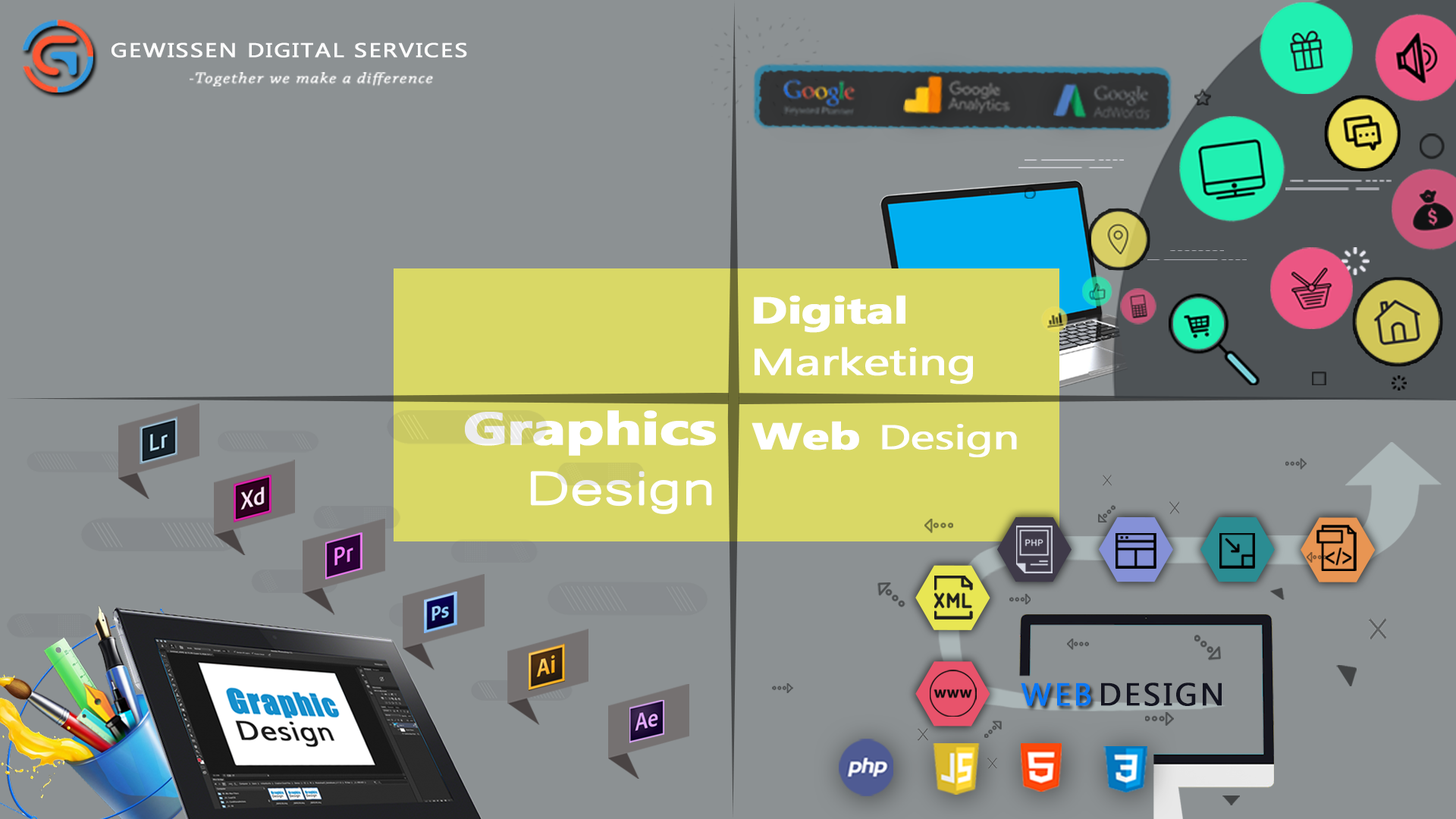
<style>
.page{position:relative;width:1456px;height:819px;background:#8c9193}
.page>*{position:absolute;margin:0}
.t1{font:19.8px "MicrosoftPhagsPa";letter-spacing:0.05em;color:#fcfcfc;font-weight:bold;scale:1.22 1}
.t2{font:15.1px "ChaparralPro-LightIt";letter-spacing:0.05em;color:#ffffff;font-weight:bold;scale:1.2 1}
.t3{font:37.1px/51.1px "MicrosoftPhagsPa";letter-spacing:-0.02em;color:#ffffff;font-weight:bold;scale:1.33 1}
.t4{font:37.1px/51.1px "MicrosoftPhagsPa-Bold";letter-spacing:-0.02em;color:#ffffff;font-weight:bold;scale:1.33 1}
.t5{font:45.9px/60.1px "MicrosoftPhagsPa-Bold";letter-spacing:-0.02em;color:#ffffff;font-weight:bold;scale:1.34 1}
.t6{font:59.7px/60.1px "Microsoft-Yi-Baiti";letter-spacing:-0.02em;color:#ffffff;font-weight:bold;scale:1.34 1}
.t7{font:34.2px "MicrosoftPhagsPa";letter-spacing:-0.02em;color:#ffffff;font-weight:bold;scale:1.33 1}
.t8{font:37.1px "MicrosoftPhagsPa-Bold";letter-spacing:-0.02em;color:#ffffff;font-weight:bold;scale:1.33 1}
.t9{font:31.7px "MicrosoftTaiLe";letter-spacing:0.07em;color:#0b78f4;font-weight:bold}
.t10{font:31.7px "MicrosoftTaiLe";letter-spacing:0.07em;color:#131420;font-weight:bold}
</style>
<div class="page">
<p class="t1" style="left:111px;top:42px;width:356px;height:16px">GEWISSEN DIGITAL SERVICES</p>
<p class="t2" style="left:190px;top:72px;width:243px;height:14px">-Together we make a difference</p>
<p class="t3" style="left:754px;top:295px;width:219px;height:89px"><span class="t4">Digital<br></span>Marketing</p>
<p class="t5" style="left:465px;top:410px;width:251px;height:104px;text-align:justify">Graphics<br><span class="t6">Design</span></p>
<p class="t7" style="left:751px;top:421px;width:266px;height:36px"><span class="t8">Web </span>Design</p>
<p class="t9" style="left:1021px;top:682px;width:70px;height:24px">WEB</p>
<p class="t10" style="left:1101px;top:682px;width:121px;height:24px">DESIGN</p>
</div>
